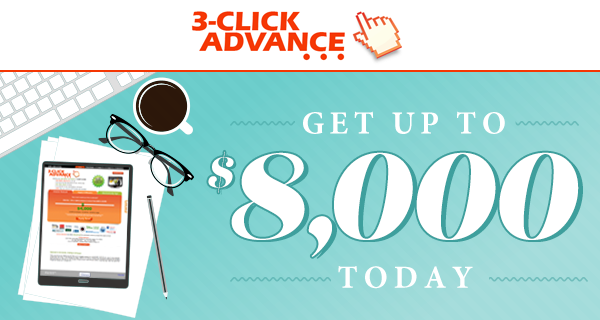
<style>
.page{position:relative;width:600px;height:320px;background:#ffffff}
.page>*{position:absolute;margin:0}
.t1{font:32.4px "MinionPro-Bold";color:#ffffff;text-transform:uppercase}
.t2{font:43px "LustScript";color:#ffffff}
.t3{font:43px "LustScript"}
.t4{font:121.6px "LustScript";color:#ffffff;text-transform:uppercase}
</style>
<div class="page">
<p class="t1" style="left:303px;top:111px;width:202px;height:23px">G e t   u p   t o</p>
<p class="t2" style="left:208px;top:151px;width:26px;height:42px">$</p>
<p class="t3" style="left:211px;top:153px;width:26px;height:42px">$</p>
<p class="t4" style="left:231px;top:152px;width:348px;height:105px">8,000</p>
<p class="t4" style="left:236px;top:154px;width:347px;height:105px">8,000</p>
<p class="t1" style="left:338px;top:266px;width:135px;height:23px">T o d a y</p>
</div>
